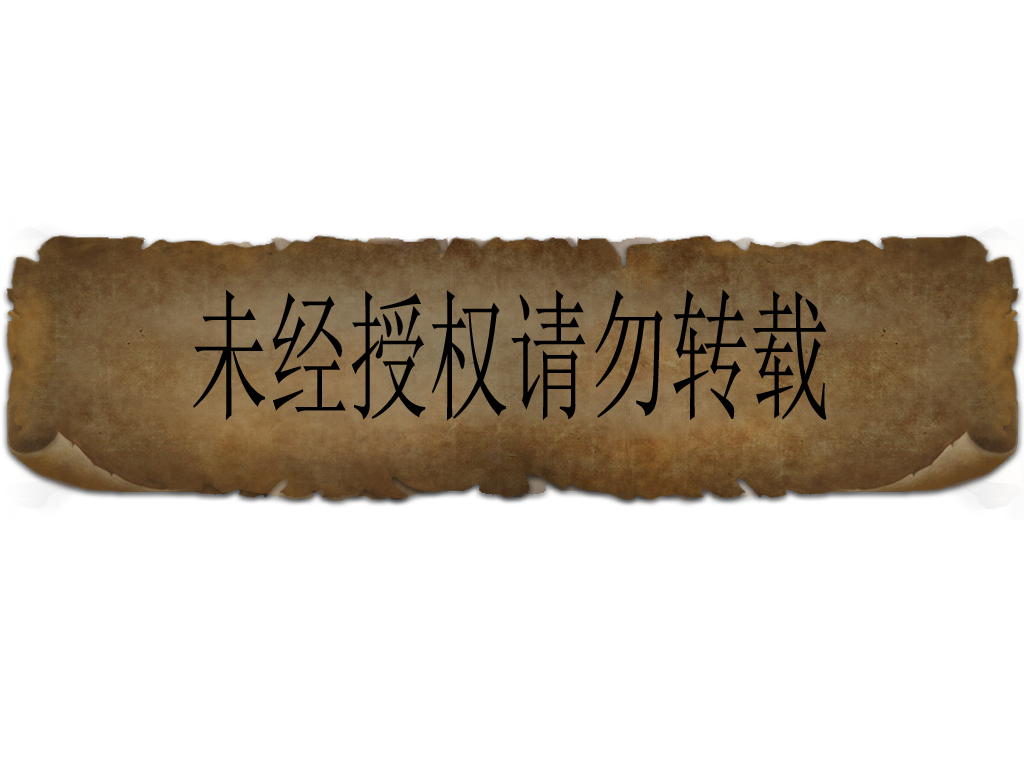
<style>
.page{position:relative;width:1024px;height:768px;background:#ffffff}
.page>*{position:absolute;margin:0}
.t1{font:141.3px "SimSun";color:#000000;scale:0.57 1}
</style>
<div class="page">
<p class="t1" style="left:189px;top:285px;width:641px;height:142px">未经授权请勿转载</p>
</div>
